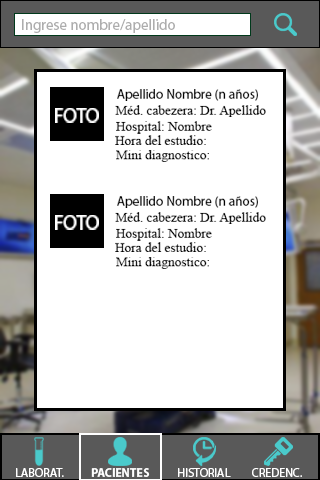
<style>
.page{position:relative;width:320px;height:480px;background:#ffffff}
.page>*{position:absolute;margin:0}
.t1{font:15px "MyriadPro-Regular";color:#adadad}
.t2{font:13.4px "MyriadPro-Regular";color:#050505}
.t3{font:19.8px "MyriadPro-Regular";color:#ffffff}
.t4{font:13.4px "MyriadPro-Regular";color:#020202}
.t5{font:13.4px "MyriadPro-Regular";color:#040404}
.t6{font:13.4px "MyriadPro-Regular";color:#000000}
.t7{font:12px "MyriadPro-Regular";color:#ffffff}
.t8{font:12px "MyriadPro-Bold";color:#ffffff}
.t9{font:12px "MyriadPro-Regular";color:#fefefe}
</style>
<div class="page">
<p class="t1" style="left:22px;top:19px;width:153px;height:14px">Ingrese nombre/apellido</p>
<p class="t2" style="left:117px;top:89px;width:141px;height:12px">Apellido Nombre (n años)</p>
<p class="t3" style="left:55px;top:108px;width:44px;height:15px">FOTO</p>
<p class="t4" style="left:115px;top:105px;width:151px;height:12px">Méd. cabezera: Dr. Apellido</p>
<p class="t5" style="left:116px;top:121px;width:96px;height:13px">Hospital: Nombre</p>
<p class="t6" style="left:115px;top:135px;width:91px;height:10px">Hora del estudio:</p>
<p class="t6" style="left:116px;top:150px;width:93px;height:12px">Mini diagnostico:</p>
<p class="t2" style="left:117px;top:196px;width:141px;height:12px">Apellido Nombre (n años)</p>
<p class="t3" style="left:55px;top:215px;width:44px;height:15px">FOTO</p>
<p class="t4" style="left:115px;top:212px;width:151px;height:12px">Méd. cabezera: Dr. Apellido</p>
<p class="t5" style="left:116px;top:228px;width:96px;height:13px">Hospital: Nombre</p>
<p class="t6" style="left:115px;top:242px;width:91px;height:10px">Hora del estudio:</p>
<p class="t6" style="left:116px;top:257px;width:93px;height:12px">Mini diagnostico:</p>
<p class="t7" style="left:16px;top:468px;width:48px;height:9px">LABORAT.</p>
<p class="t8" style="left:91px;top:468px;width:59px;height:9px">PACIENTES</p>
<p class="t9" style="left:178px;top:468px;width:53px;height:9px">HISTORIAL</p>
<p class="t7" style="left:252px;top:468px;width:50px;height:9px">CREDENC.</p>
</div>
